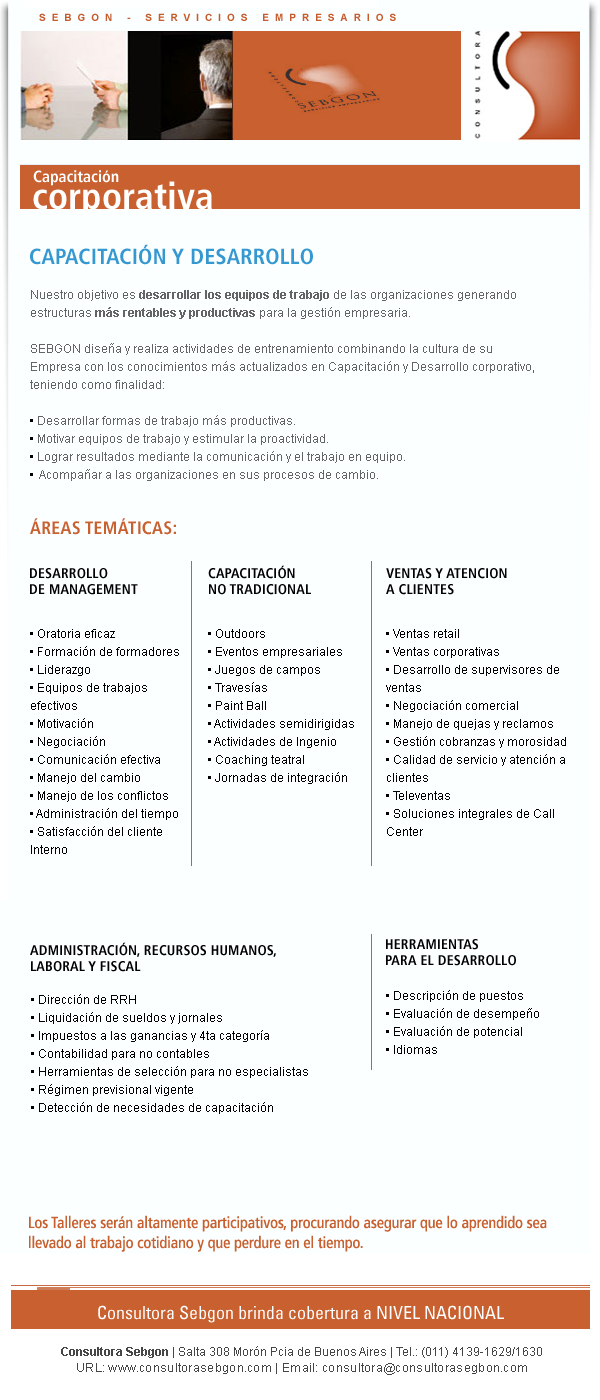
<style>
.page{position:relative;width:600px;height:1400px;background:#fcffff}
.page>*{position:absolute;margin:0}
.t1{font:10px "Arial-BoldMT";letter-spacing:0.6em;color:#c65b2c}
.t2{font:16px "FrutigerLTStd-BoldCn";color:#ffffff}
.t3{font:37.6px "FrutigerLTStd-BoldCn";color:#ffffff}
.t4{font:22px "FrutigerLTStd-BoldCn";letter-spacing:0.01em;color:#3598d1}
.t5{font:12px/18px "ArialMT";color:#646464}
.t6{font:12px/18px "Arial-BoldMT";color:#646464}
.t7{font:12px/18px "ArialMT";color:#000000}
.t8{font:18px "FrutigerLTStd-BoldCn";letter-spacing:0.01em;color:#c86030}
.t9{font:14px/16px "FrutigerLTStd-BoldCn";letter-spacing:0.01em;color:#000000}
.t10{font:16px/20px "FrutigerLTStd-Cn";color:#c86030}
.t11{font:18px "UniversLTStd-Cn";color:#fcffff}
.t12{font:12px/16px "ArialMT";letter-spacing:0.025em;color:#464646}
.t13{font:12px/16px "Arial-BoldMT";color:#464646}
.t14{font:12px/16px "ArialMT";color:#464646}
</style>
<div class="page">
<p class="t1" style="left:39px;top:13px;width:357px;height:8px">SEBGON - SERVICIOS EMPRESARIOS</p>
<p class="t2" style="left:33px;top:170px;width:86px;height:16px">Capacitación</p>
<p class="t3" style="left:33px;top:181px;width:179px;height:36px">corporativa</p>
<p class="t4" style="left:30px;top:244px;width:283px;height:21px">CAPACITACIÓN Y DESARROLLO</p>
<p class="t5" style="left:30px;top:290px;width:504px;height:191px">Nuestro objetivo es <span class="t6">desarrollar los equipos de trabajo</span> de las organizaciones generando <br>estructuras <span class="t6">más rentables y productivas</span> para la gestión empresaria. <br><br>SEBGON diseña y realiza actividades de entrenamiento combinando la cultura de su <br>Empresa con los conocimientos más actualizados en Capacitación y Desarrollo corporativo, teniendo como finalidad:  <br><br><span class="t7">• </span>Desarrollar formas de trabajo más productivas.  <br><span class="t7">• </span>Motivar equipos de trabajo y estimular la proactividad. <br><span class="t7">• </span>Lograr resultados mediante la comunicación y el trabajo en equipo.  <br><span class="t7">• </span> Acompañar a las organizaciones en sus procesos de cambio.</p>
<p class="t8" style="left:30px;top:518px;width:146px;height:17px">ÁREAS TEMÁTICAS:</p>
<p class="t9" style="left:30px;top:568px;width:108px;height:27px">DESARROLLO <br>DE MANAGEMENT</p>
<p class="t9" style="left:208px;top:565px;width:103px;height:30px">CAPACITACIÓN<br>NO TRADICIONAL</p>
<p class="t9" style="left:386px;top:568px;width:121px;height:27px">VENTAS Y ATENCION<br>A CLIENTES</p>
<p class="t7" style="left:30px;top:629px;width:149px;height:225px">• Oratoria eficaz<br>• Formación de formadores<br>• Liderazgo<br>• Equipos de trabajos efectivos<br>• Motivación<br>• Negociación<br>• Comunicación efectiva<br>• Manejo del cambio<br>• Manejo de los conflictos<br>• Administración del tiempo<br>• Satisfacción del cliente Interno</p>
<p class="t7" style="left:208px;top:629px;width:146px;height:155px">• Outdoors<br>• Eventos empresariales <br>• Juegos de campos<br>• Travesías<br>• Paint Ball<br>• Actividades semidirigidas<br>• Actividades de Ingenio<br>• Coaching teatral<br>• Jornadas de integración</p>
<p class="t7" style="left:386px;top:629px;width:180px;height:207px">• Ventas retail<br>• Ventas corporativas<br>• Desarrollo de supervisores de ventas  <br>• Negociación comercial <br>• Manejo de quejas y reclamos<br>• Gestión cobranzas y morosidad<br>• Calidad de servicio y atención a clientes<br>• Televentas<br>• Soluciones integrales de Call Center</p>
<p class="t9" style="left:30px;top:942px;width:246px;height:30px">ADMINISTRACIÓN, RECURSOS HUMANOS,<br>LABORAL Y FISCAL</p>
<p class="t9" style="left:386px;top:939px;width:130px;height:27px">HERRAMIENTAS<br>PARA EL DESARROLLO</p>
<p class="t7" style="left:386px;top:990px;width:153px;height:64px">• Descripción de puestos<br>• Evaluación de desempeño<br>• Evaluación de potencial<br>• Idiomas</p>
<p class="t7" style="left:31px;top:994px;width:277px;height:120px">• Dirección de RRH<br>• Liquidación de sueldos y jornales<br>• Impuestos a las ganancias y 4ta categoría<br>• Contabilidad para no contables<br>• Herramientas de selección para no especialistas<br>• Régimen previsional vigente<br>• Detección de necesidades de capacitación</p>
<p class="t10" style="left:29px;top:1215px;width:518px;height:37px">Los Talleres serán altamente participativos, procurando asegurar que lo aprendido sea llevado al trabajo cotidiano y que perdure en el tiempo.</p>
<p class="t11" style="left:98px;top:1305px;width:406px;height:18px">Consultora Sebgon brinda cobertura a NIVEL NACIONAL</p>
<p class="t12" style="left:61px;top:1346px;width:481px;height:29px;text-align:center"><span class="t13">Consultora Sebgon </span><span class="t14">| Salta 308 Morón Pcia de Buenos Aires | Tel.: (011) 4139-1629/1630<br></span>URL: www.consultorasebgon.com | Email: consultora@consultorasegbon.com</p>
</div>
